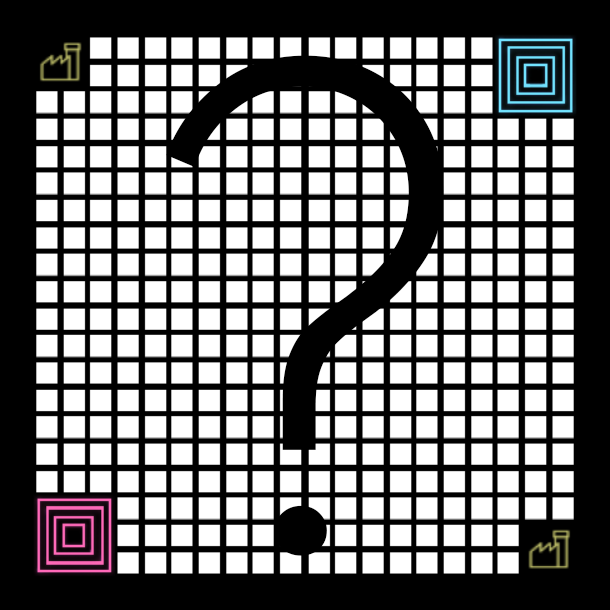
<style>
.page{position:relative;width:610px;height:610px;background:#000000}
.page>*{position:absolute;margin:0}
.t1{font:700.2px "JosefinSans-Light";color:#000000}
</style>
<div class="page">
<p class="t1" style="left:166px;top:55px;width:278px;height:501px">?</p>
</div>
